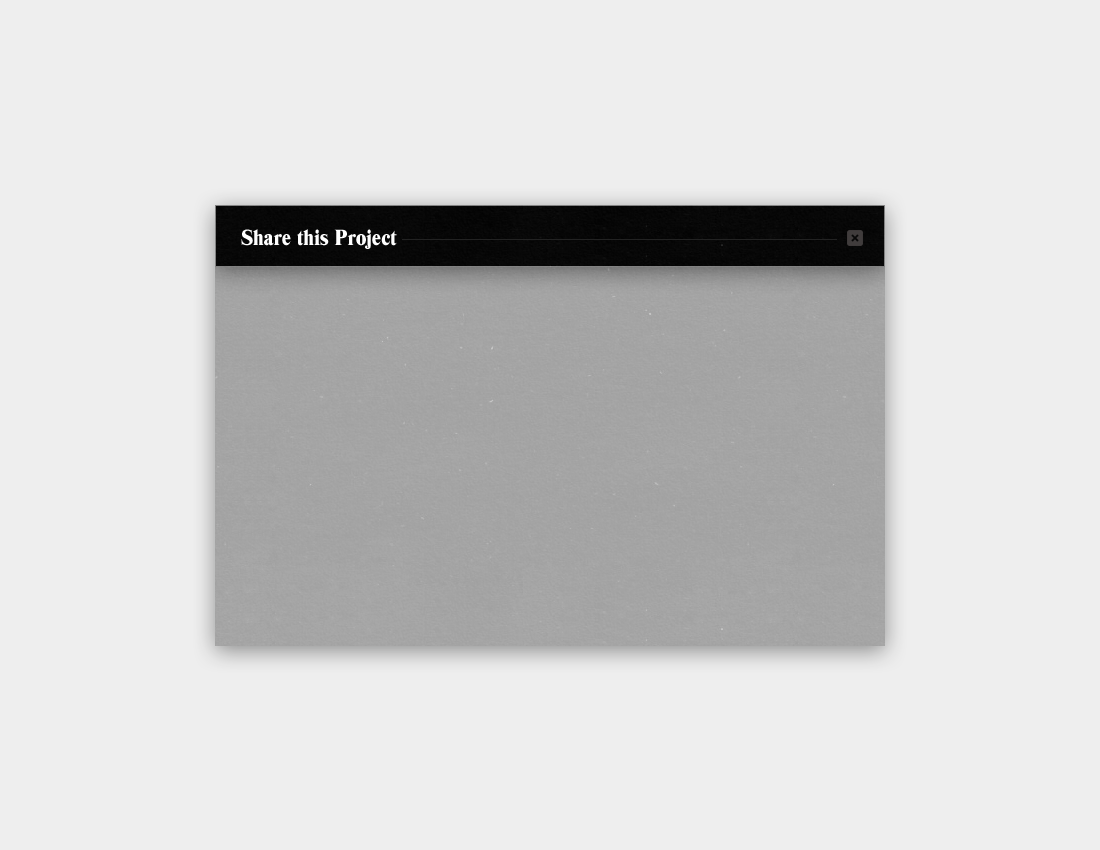
<style>
.page{position:relative;width:1100px;height:850px;background:#eeeeee}
.page>*{position:absolute;margin:0}
.t1{font:22.9px "TimesModernEF";color:#fefefe}
</style>
<div class="page">
<p class="t1" style="left:241px;top:229px;width:156px;height:20px">Share this Project</p>
</div>
